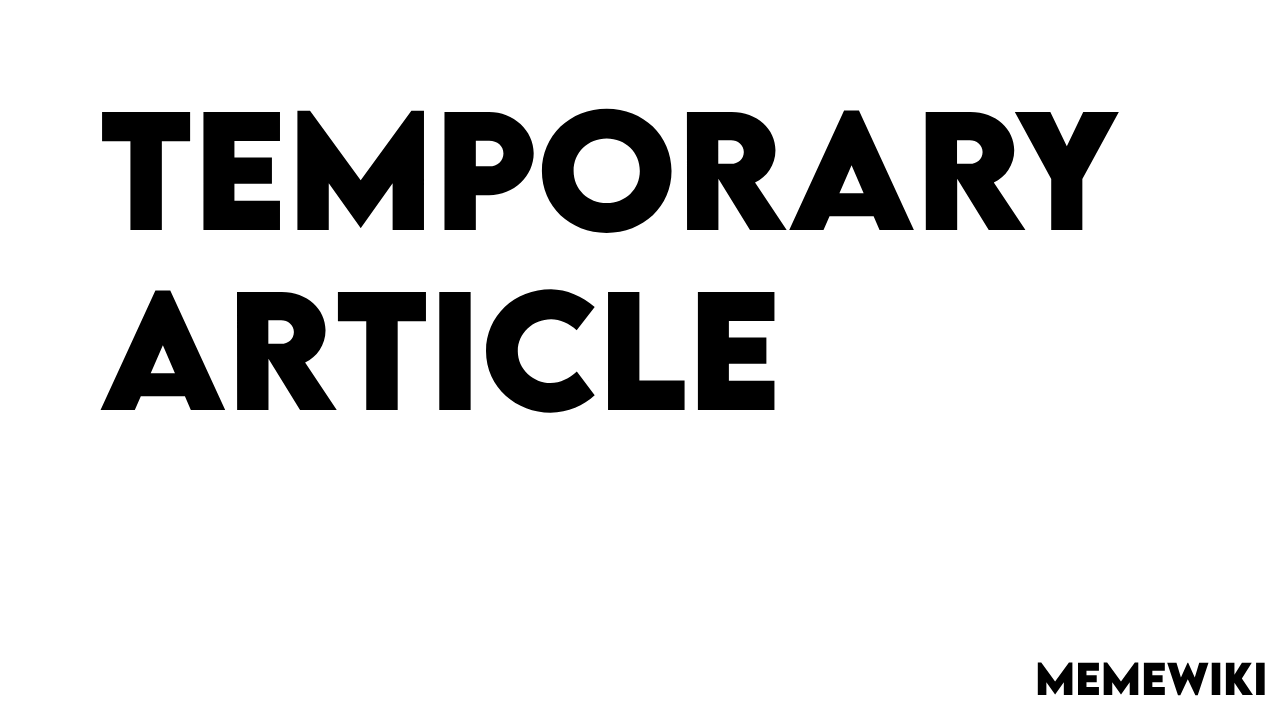
<style>
.page{position:relative;width:1280px;height:720px;background:#ffffff}
.page>*{position:absolute;margin:0}
.t1{font:150px "LEMONMILK-Bold";color:#000000}
.t2{font:41px "LEMONMILK-Bold";color:#000000}
</style>
<div class="page">
<p class="t1" style="left:100px;top:108px;width:1019px;height:305px">TEMPORARY<br>ARTICLE</p>
<p class="t2" style="left:1037px;top:662px;width:228px;height:34px">memewiki</p>
</div>
